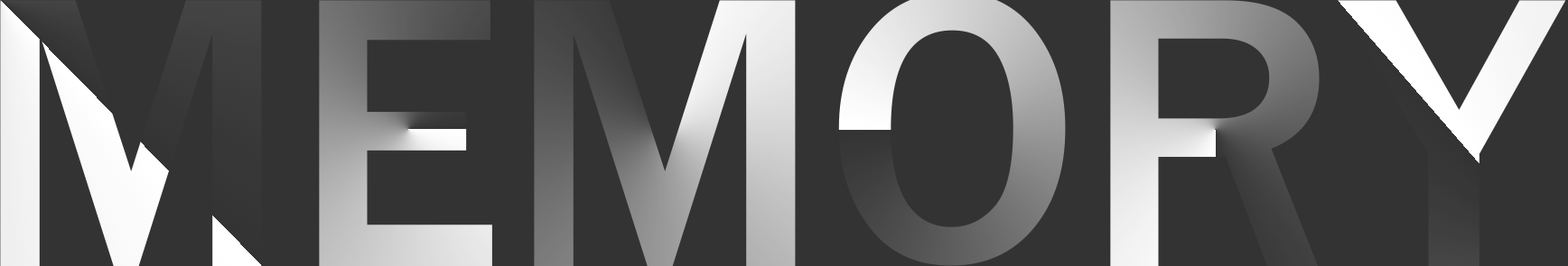
<style>
.page{position:relative;width:1568px;height:266px;background:#333333}
.page>*{position:absolute;margin:0}
.t1{font:399.2px "FranklinGothic-Medium"}
</style>
<div class="page">
<p class="t1" style="left:0px;top:0px;width:262px;height:266px">M</p>
<p class="t1" style="left:319px;top:0px;width:173px;height:266px">E</p>
<p class="t1" style="left:534px;top:0px;width:262px;height:266px">M</p>
<p class="t1" style="left:1110px;top:0px;width:210px;height:266px">R</p>
<p class="t1" style="left:1338px;top:0px;width:228px;height:266px">Y</p>
</div>
